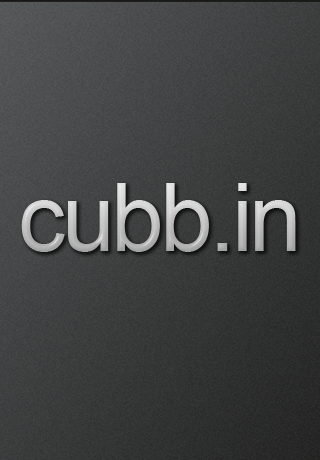
<style>
.page{position:relative;width:320px;height:460px}
.page>*{position:absolute;margin:0}
.t1{font:95.4px "ArialMT";letter-spacing:-0.04em}
</style>
<div class="page">
<p class="t1" style="left:21px;top:183px;width:275px;height:69px">cubb.in</p>
</div>
